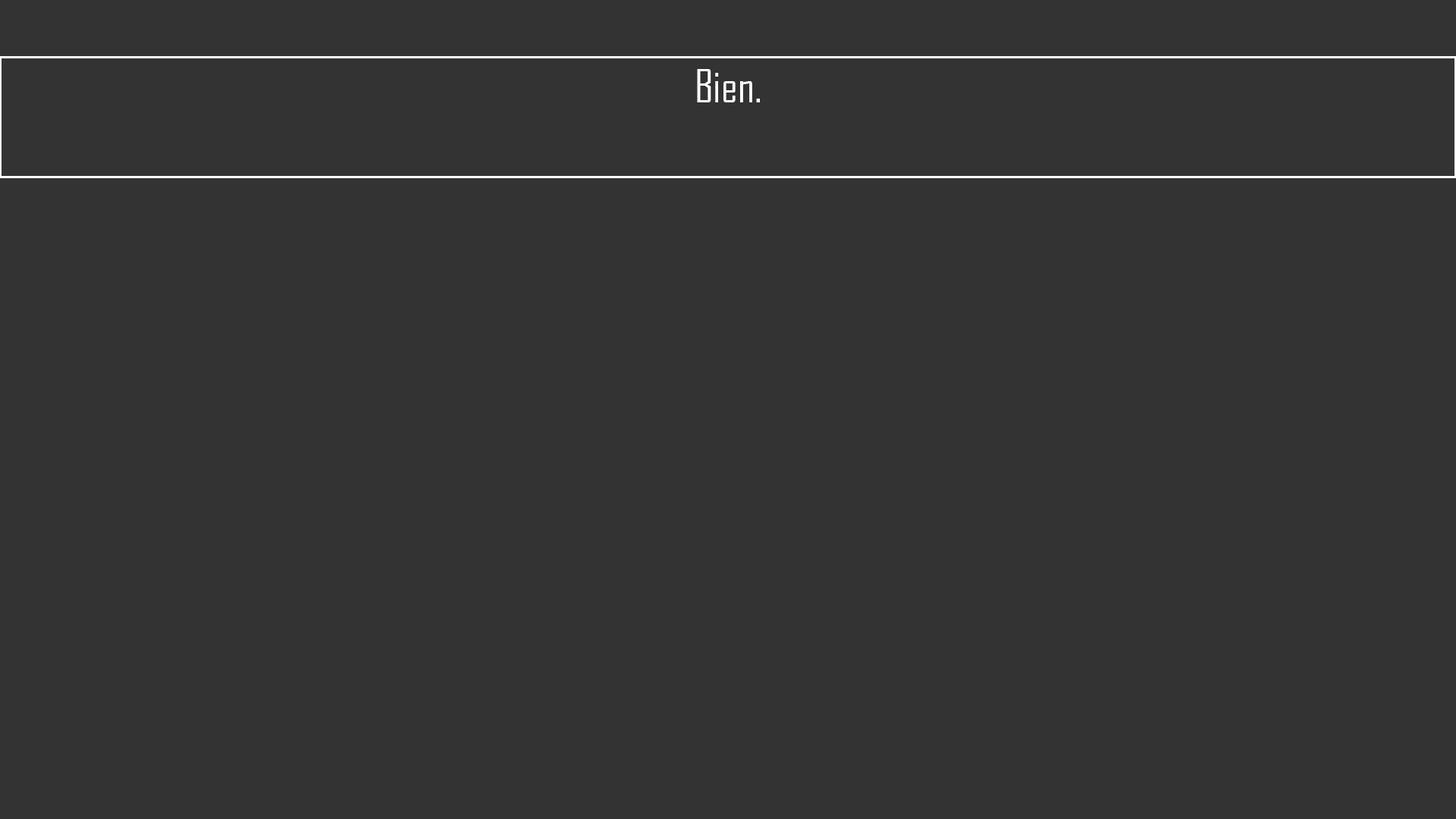
<style>
.page{position:relative;width:1456px;height:819px;background:#333333}
.page>*{position:absolute;margin:0}
.t1{font:44.2px "AgencyFB-Reg";color:#ffffff}
</style>
<div class="page">
<p class="t1" style="left:697px;top:69px;width:63px;height:33px">Bien.</p>
</div>
